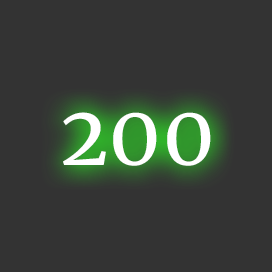
<style>
.page{position:relative;width:272px;height:272px;background:#333333}
.page>*{position:absolute;margin:0}
.t1{font:82.9px "Merriweather-Regular";color:#ffffff}
</style>
<div class="page">
<p class="t1" style="left:63px;top:112px;width:148px;height:54px">200</p>
</div>
